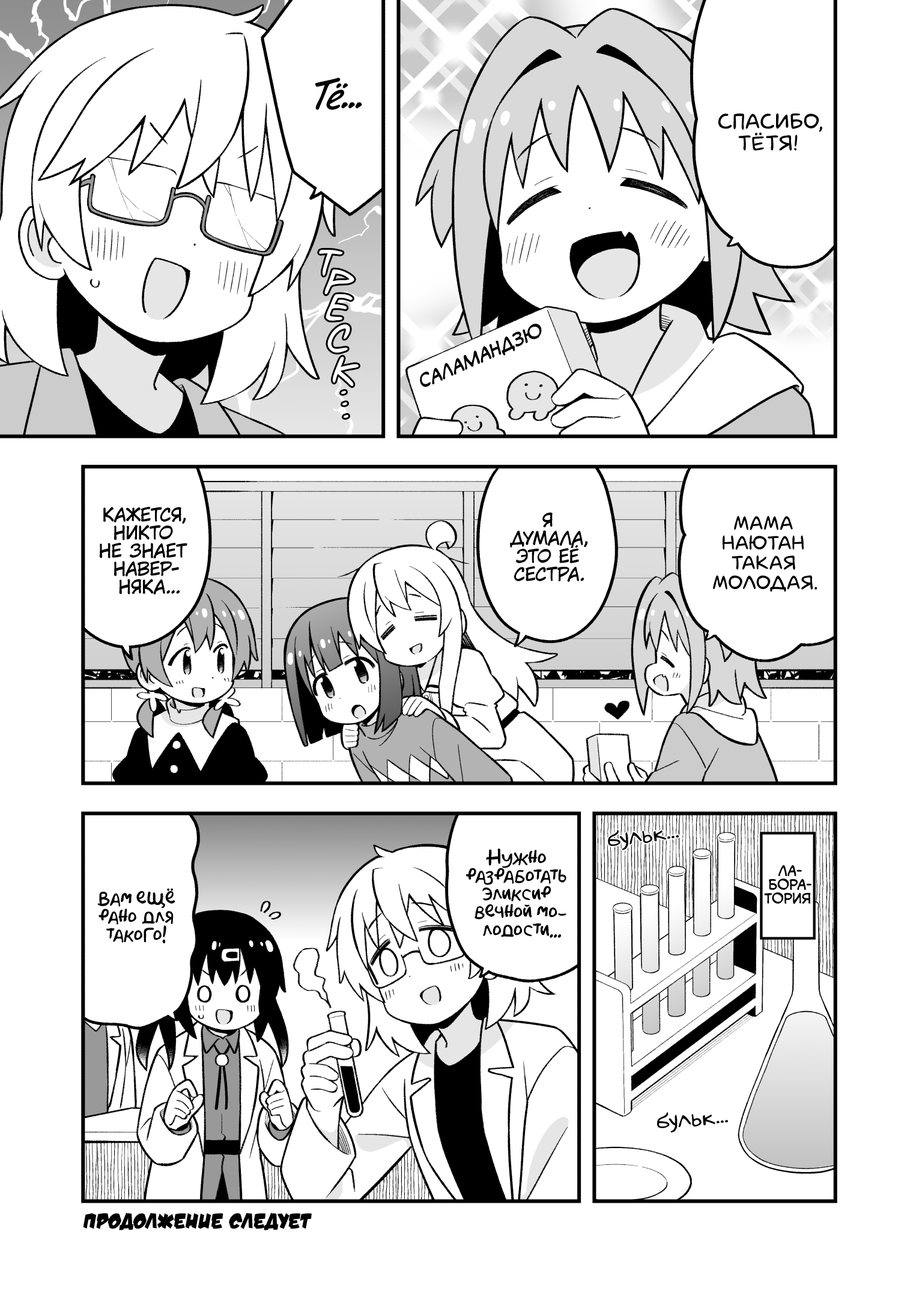
<style>
.page{position:relative;width:919px;height:1297px;background:#ffffff}
.page>*{position:absolute;margin:0}
.t1{font:36px "v_CCDearDiary";color:#000000}
.t2{font:21.6px "laCartoonerie";color:#000000;text-transform:uppercase}
.t3{font:45.1px "v_MangaMasterBB";color:#ffffff}
.t4{font:18px "v_CCMonologous";color:#000000;text-transform:uppercase}
.t5{font:36px "v_MangaMasterBB";color:#ffffff}
.t6{font:18px "KuraiVoice2";color:#000000;text-transform:uppercase}
.t7{font:19.8px "laCartoonerie";color:#000000;text-transform:uppercase}
.t8{font:23.4px "v_Augie";color:#000000}
.t9{font:18px "AkbarPlain";color:#000000}
.t10{font:13.8px "v_CCMonologous";color:#000000;text-transform:uppercase}
.t11{font:21.6px "v_DamnNoisyKids";color:#000000;text-transform:uppercase}
</style>
<div class="page">
<p class="t1" style="left:315px;top:77px;width:47px;height:33px">Тё...</p>
<p class="t2" style="left:718px;top:114px;width:104px;height:37px;text-align:center">Спасибо,<br>тётя!</p>
<p class="t3" style="left:319px;top:250px;width:24px;height:26px;rotate:15deg">т</p>
<p class="t3" style="left:324px;top:269px;width:30px;height:26px;rotate:26deg">р</p>
<p class="t3" style="left:326px;top:294px;width:27px;height:27px;rotate:24deg">е</p>
<p class="t3" style="left:327px;top:324px;width:23px;height:29px;rotate:14deg">с</p>
<p class="t4" style="left:420px;top:324px;width:122px;height:63px;rotate:-24deg">Саламандзю</p>
<p class="t3" style="left:332px;top:357px;width:27px;height:29px;rotate:22deg">к</p>
<p class="t5" style="left:341px;top:391px;width:5px;height:3px">.</p>
<p class="t5" style="left:342px;top:402px;width:5px;height:3px">.</p>
<p class="t5" style="left:344px;top:415px;width:4px;height:3px">.</p>
<p class="t6" style="left:100px;top:507px;width:87px;height:88px;text-align:center">Кажется,<br>никто<br>не знает<br>навер-<br>няка...</p>
<p class="t6" style="left:510px;top:512px;width:78px;height:70px;text-align:center">Я<br>думала,<br>это её<br>сестра.</p>
<p class="t7" style="left:713px;top:516px;width:104px;height:76px;text-align:center">Мама<br>Наютан<br>такая<br>молодая.</p>
<p class="t8" style="left:608px;top:830px;width:71px;height:21px;rotate:-8deg">бульк...</p>
<p class="t9" style="left:466px;top:849px;width:101px;height:89px;text-align:center">Нужно<br>разработать<br>эликсир<br>вечной мо-<br>лодости...</p>
<p class="t10" style="left:764px;top:865px;width:48px;height:40px;text-align:center">Ла-<br>бора-<br>тория</p>
<p class="t9" style="left:97px;top:888px;width:78px;height:56px;text-align:center">Вам ещё<br>рано для<br>такого!</p>
<p class="t8" style="left:657px;top:1112px;width:71px;height:21px;rotate:-6deg">бульк...</p>
<p class="t11" style="left:83px;top:1213px;width:229px;height:18px">Продолжение следует</p>
</div>
